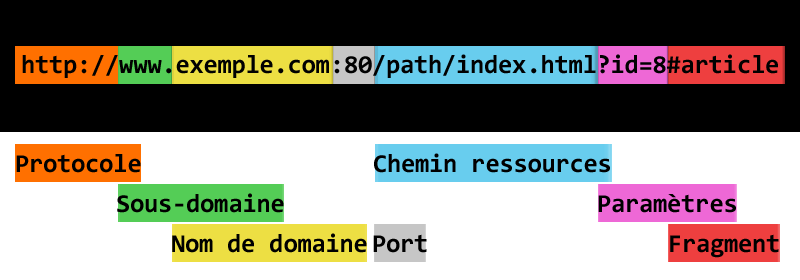
<style>
.page{position:relative;width:800px;height:280px;background:#000000}
.page>*{position:absolute;margin:0}
.t1{font:26px "Consolas-Bold";letter-spacing:-0.01em;color:#010101}
.t2{font:26px "Consolas-Bold";letter-spacing:-0.01em;color:#000000}
</style>
<div class="page">
<p class="t1" style="left:22px;top:54px;width:756px;height:24px">http://www.exemple.com:80/path/index.html?id=8#article</p>
<p class="t2" style="left:16px;top:154px;width:125px;height:19px">Protocole</p>
<p class="t2" style="left:374px;top:153px;width:236px;height:20px">Chemin ressources</p>
<p class="t2" style="left:117px;top:193px;width:167px;height:20px">Sous-domaine</p>
<p class="t2" style="left:598px;top:194px;width:138px;height:19px">Paramètres</p>
<p class="t2" style="left:172px;top:233px;width:195px;height:20px">Nom de domaine</p>
<p class="t2" style="left:373px;top:234px;width:54px;height:19px">Port</p>
<p class="t2" style="left:670px;top:234px;width:109px;height:24px">Fragment</p>
</div>
